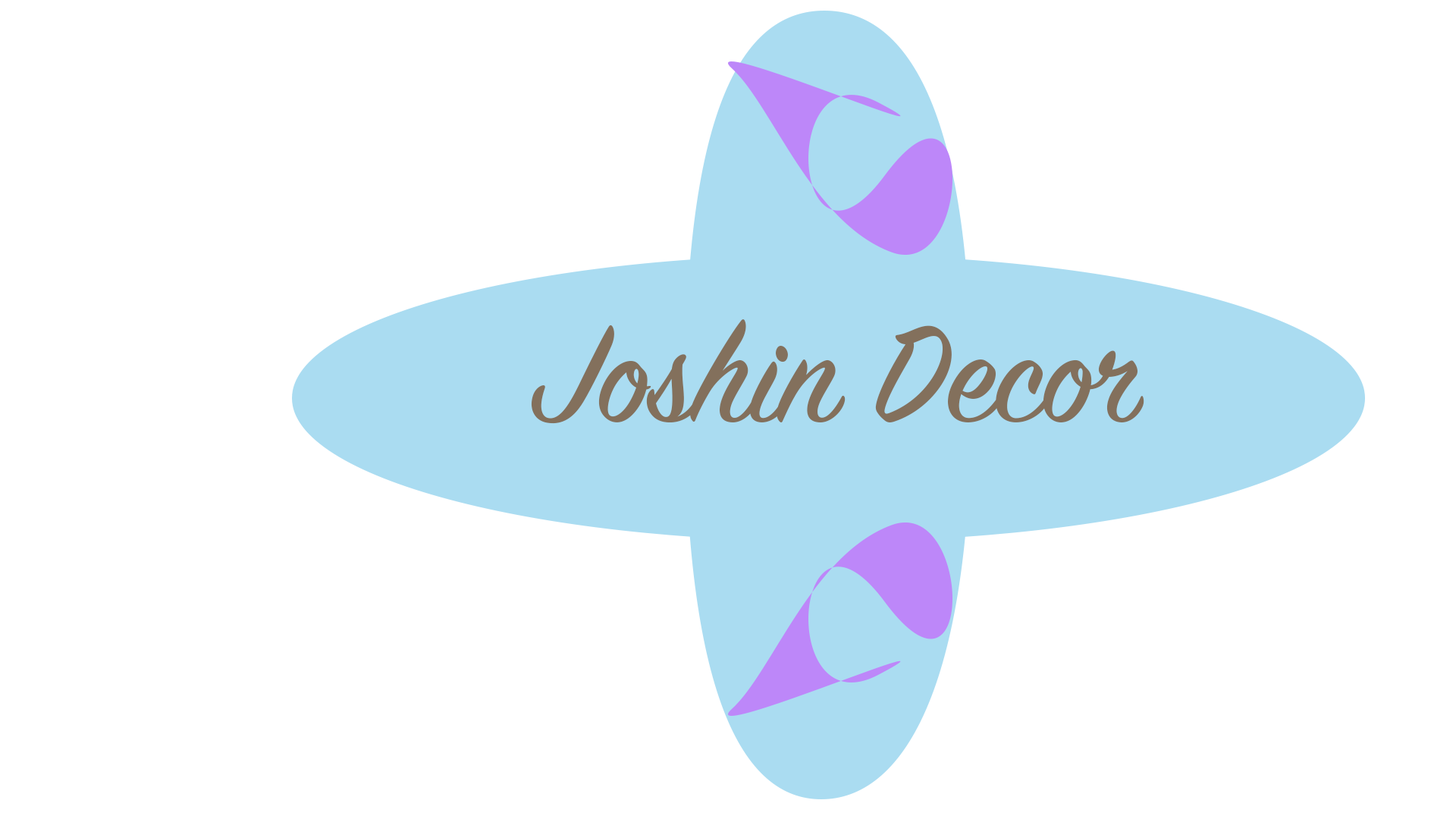
<style>
.page{position:relative;width:1456px;height:819px;background:#ffffff}
.page>*{position:absolute;margin:0}
.t1{font:151.7px "SignPainter-HouseScript";color:#83705c}
</style>
<div class="page">
<p class="t1" style="left:531px;top:319px;width:613px;height:105px">Joshin Decor</p>
</div>
